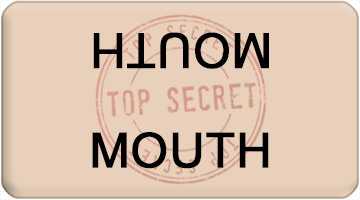
<style>
.page{position:relative;width:360px;height:200px;background:#e8d0bb}
.page>*{position:absolute;margin:0}
.t1{font:48px "ArialMT";color:#000000;font-weight:bold}
</style>
<div class="page">
<p class="t1" style="left:93px;top:32px;width:176px;height:37px;rotate:180deg">MOUTH</p>
<p class="t1" style="left:92px;top:132px;width:177px;height:37px">MOUTH</p>
</div>
